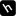
<style>
.page{position:relative;width:16px;height:16px;background:#000000}
.page>*{position:absolute;margin:0}
.t1{font:14px "GillSans";letter-spacing:-0.025em;color:#ffffff}
</style>
<div class="page">
<p class="t1" style="left:2px;top:3px;width:11px;height:10px;rotate:-33deg">h</p>
</div>
